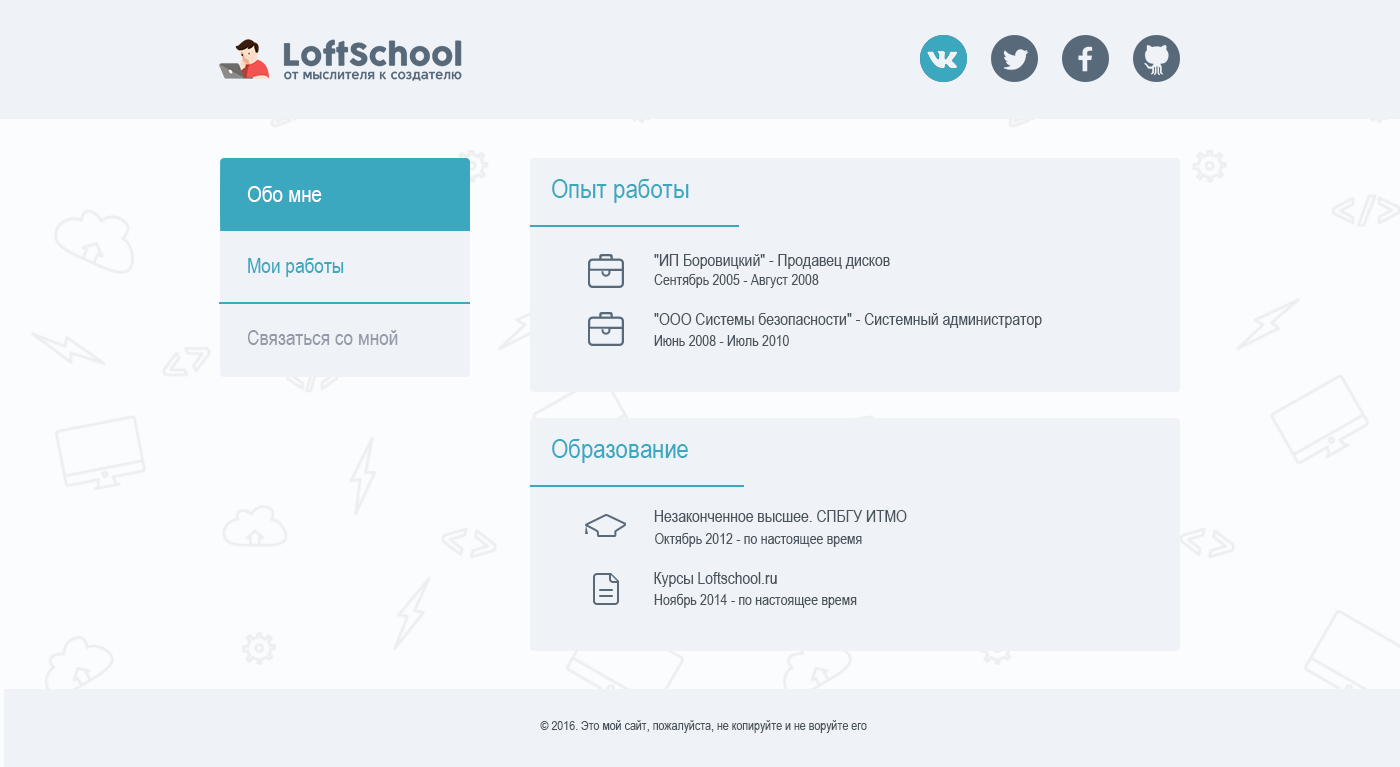
<style>
.page{position:relative;width:1400px;height:767px;background:#eff3f7}
.page>*{position:absolute;margin:0}
.t1{font:27px "ArialNarrow";color:#3ba8c0}
.t2{font:23px "ArialNarrow";color:#ffffff}
.t3{font:17px "ArialNarrow";color:#4a545d}
.t4{font:21px "ArialNarrow";color:#3ba8c0}
.t5{font:15px "ArialNarrow";color:#4a545d}
.t6{font:21px "ArialNarrow";color:#959aa8}
.t7{font:13px "ArialNarrow";color:#4a545d}
</style>
<div class="page">
<p class="t1" style="left:552px;top:179px;width:137px;height:24px">Опыт работы</p>
<p class="t2" style="left:247px;top:186px;width:75px;height:16px">Обо мне</p>
<p class="t3" style="left:654px;top:254px;width:236px;height:15px">"ИП Боровицкий" - Продавец дисков</p>
<p class="t4" style="left:248px;top:258px;width:96px;height:19px">Мои работы</p>
<p class="t5" style="left:654px;top:274px;width:165px;height:14px">Сентябрь 2005 - Август 2008</p>
<p class="t3" style="left:654px;top:313px;width:388px;height:15px">"ООО Системы безопасности" - Системный администратор</p>
<p class="t6" style="left:247px;top:330px;width:151px;height:15px">Связаться со мной</p>
<p class="t5" style="left:654px;top:335px;width:135px;height:11px">Июнь 2008 - Июль 2010</p>
<p class="t1" style="left:552px;top:439px;width:136px;height:24px">Образование</p>
<p class="t3" style="left:654px;top:510px;width:253px;height:12px">Незаконченное высшее. СПБГУ ИТМО</p>
<p class="t5" style="left:655px;top:533px;width:207px;height:14px">Октябрь 2012 - по настоящее время</p>
<p class="t3" style="left:654px;top:572px;width:123px;height:15px">Курсы Loftschool.ru</p>
<p class="t5" style="left:654px;top:594px;width:203px;height:14px">Ноябрь 2014 - по настоящее время</p>
<p class="t7" style="left:540px;top:720px;width:327px;height:13px">© 2016. Это мой сайт, пожалуйста, не копируйте и не воруйте его</p>
</div>
